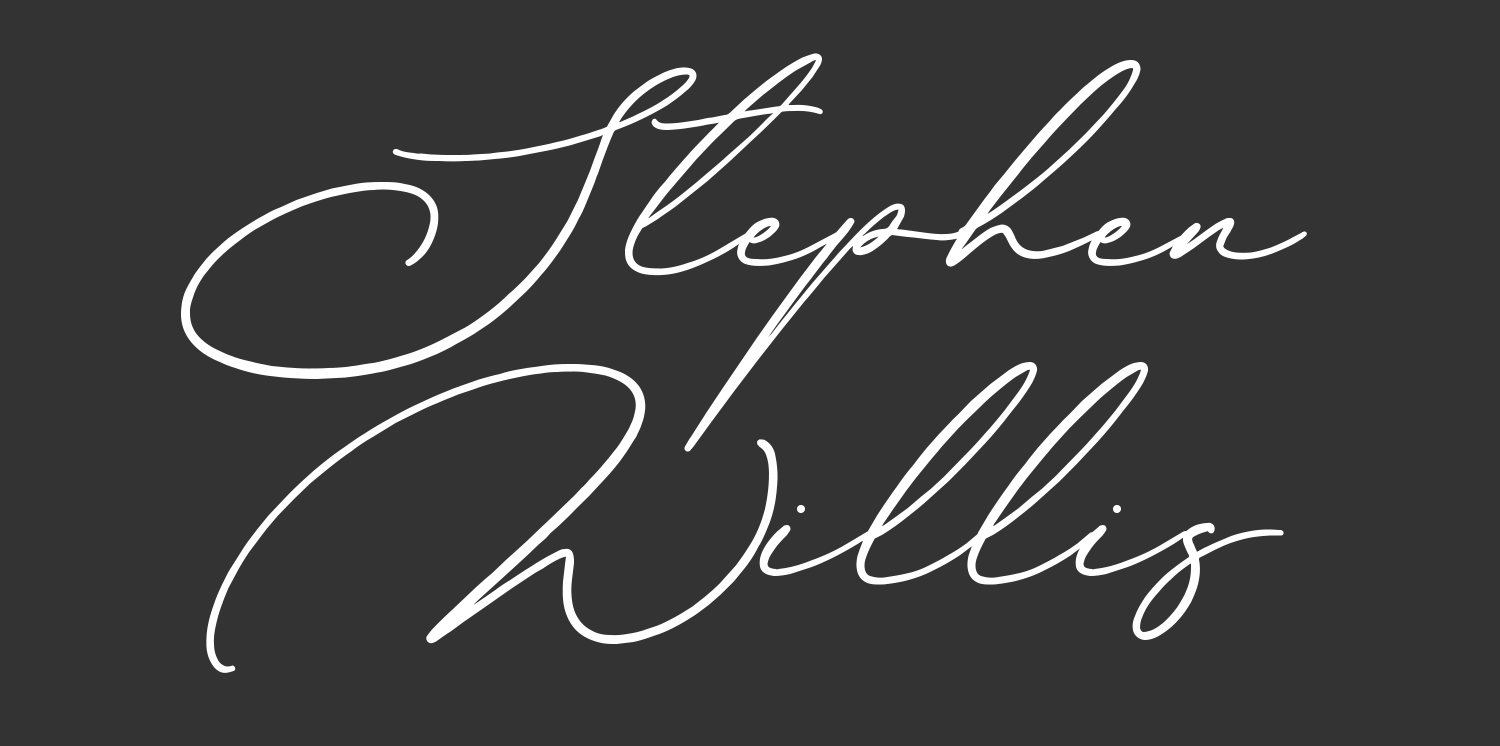
<style>
.page{position:relative;width:1500px;height:746px;background:#333333}
.page>*{position:absolute;margin:0}
.t1{font:500px/300px "Aberatta";color:#ffffff}
</style>
<div class="page">
<p class="t1" style="left:181px;top:53px;width:1126px;height:620px;text-align:center">Stephen<br>Willis</p>
</div>
